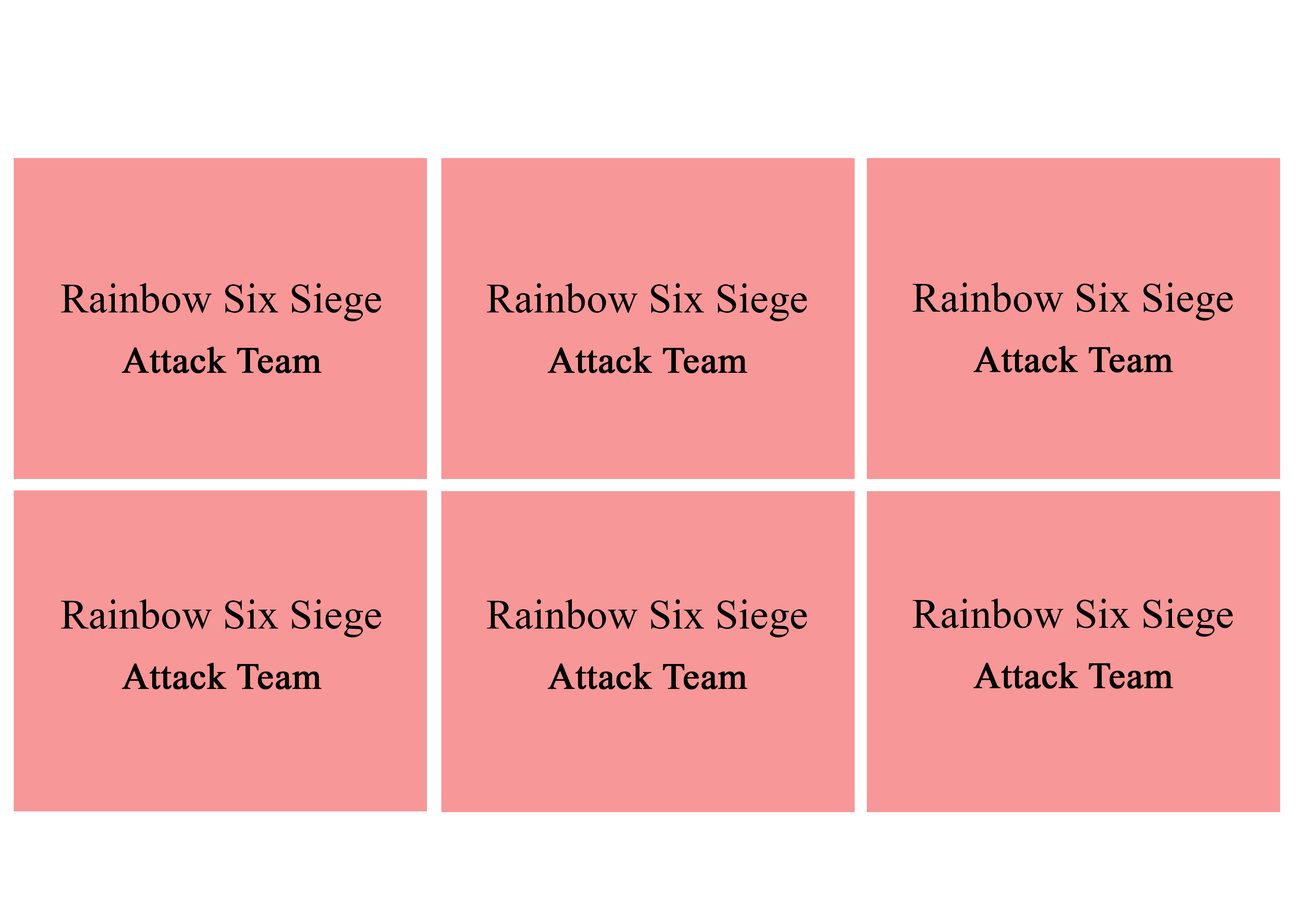
<style>
.page{position:relative;width:1299px;height:918px;background:#f89797}
.page>*{position:absolute;margin:0}
.t1{font:10.1px "TimesNewRomanPSMT";color:#000000}
.t2{font:37px "TimesNewRomanPSMT";color:#000000;font-weight:bold}
</style>
<div class="page">
<p class="t1" style="left:61px;top:283px;width:320px;height:38px;text-align:center">Rainbow Six Siege</p>
<p class="t1" style="left:486px;top:283px;width:321px;height:38px;text-align:center">Rainbow Six Siege</p>
<p class="t1" style="left:912px;top:282px;width:320px;height:39px;text-align:center">Rainbow Six Siege</p>
<p class="t2" style="left:122px;top:347px;width:199px;height:27px">Attack Team</p>
<p class="t2" style="left:548px;top:347px;width:199px;height:27px">Attack Team</p>
<p class="t2" style="left:973px;top:346px;width:200px;height:27px">Attack Team</p>
<p class="t1" style="left:61px;top:599px;width:320px;height:39px;text-align:center">Rainbow Six Siege</p>
<p class="t1" style="left:486px;top:599px;width:321px;height:39px;text-align:center">Rainbow Six Siege</p>
<p class="t1" style="left:912px;top:599px;width:320px;height:38px;text-align:center">Rainbow Six Siege</p>
<p class="t2" style="left:122px;top:663px;width:199px;height:27px">Attack Team</p>
<p class="t2" style="left:548px;top:663px;width:199px;height:27px">Attack Team</p>
<p class="t2" style="left:973px;top:662px;width:200px;height:27px">Attack Team</p>
</div>
